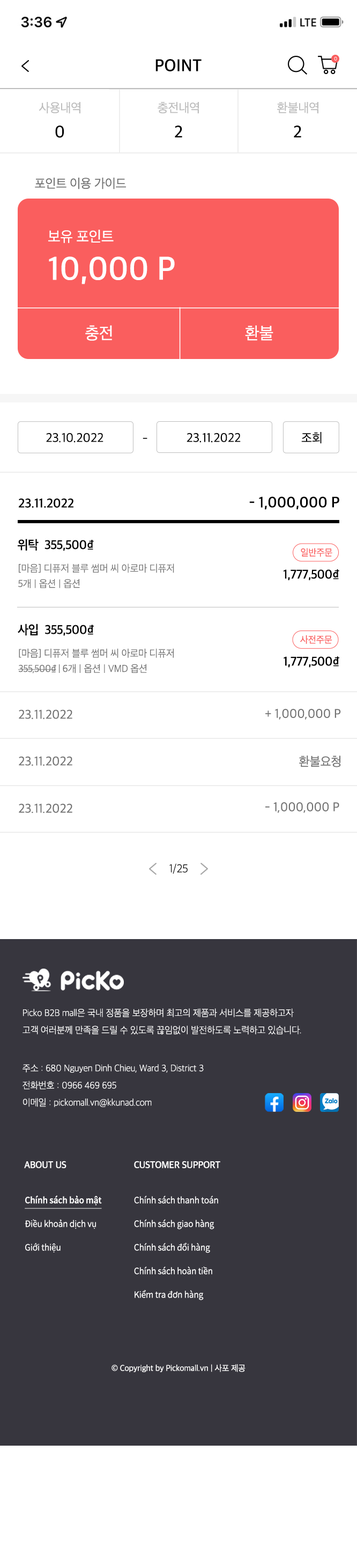
<style>
.page{position:relative;width:357px;height:1568px;background:#ffffff}
.page>*{position:absolute;margin:0}
.t1{font:17.2px "AppleSDGothicNeo-SemiBold";letter-spacing:0.017em;color:#000000;text-transform:uppercase}
.t2{font:5.3px "AppleSDGothicNeo-UltraLight";letter-spacing:-0.01em;color:#ffffff}
.t3{font:12.9px "AppleSDGothicNeo-Regular";letter-spacing:-0.01em;color:#bdbdbd;scale:0.97 1}
.t4{font:17.2px "AppleSDGothicNeo-Medium";letter-spacing:-0.01em;color:#020202;scale:0.97 1}
.t5{font:12.9px "AppleSDGothicNeo-Regular";letter-spacing:-0.01em;color:#727272;scale:0.97 1}
.t6{font:15px "AppleSDGothicNeo-Regular";letter-spacing:-0.01em;color:#ffffff;scale:0.97 1}
.t7{font:33.4px "AppleSDGothicNeo-SemiBold";letter-spacing:-0.01em;color:#ffffff;scale:0.97 1}
.t8{font:17.2px "AppleSDGothicNeo-Regular";letter-spacing:-0.01em;color:#ffffff;scale:0.97 1}
.t9{font:12.9px "AppleSDGothicNeo-Regular";letter-spacing:-0.01em;color:#000000;scale:0.97 1}
.t10{font:12.5px "AppleSDGothicNeo-Regular";letter-spacing:-0.01em;color:#000000;scale:0.97 1}
.t11{font:15.3px "AppleSDGothicNeo-SemiBold";letter-spacing:-0.01em;color:#000000}
.t12{font:12.9px "AppleSDGothicNeo-SemiBold";letter-spacing:-0.01em;color:#000000}
.t13{font:12.9px "AppleSDGothicNeo-SemiBold";letter-spacing:-0.022em;color:#010101;scale:0.96 1}
.t14{font:12.9px "NotoSansCJKkr-Medium";letter-spacing:-0.022em;color:#010101;scale:0.96 1}
.t15{font:9.7px "AppleSDGothicNeo-Regular";letter-spacing:-0.01em;color:#fa5e5e;scale:0.97 1}
.t16{font:10.2px/15.3px "AppleSDGothicNeo-Light";letter-spacing:-0.01em;color:#757575;scale:0.97 1}
.t17{font:10.2px/13.1px "AppleSDGothicNeo-Light";letter-spacing:-0.01em;color:#757575;scale:0.97 1}
.t18{font:12.9px "AppleSDGothicNeo-SemiBold";letter-spacing:-0.022em;color:#000000;scale:0.96 1}
.t19{font:12.9px "NotoSansCJKkr-Medium";letter-spacing:-0.022em;color:#000000;scale:0.96 1}
.t20{font:10.2px/15.4px "AppleSDGothicNeo-Light";letter-spacing:-0.01em;color:#727272;scale:0.97 1}
.t21{font:10.2px/13.1px "AppleSDGothicNeo-Light";letter-spacing:-0.01em;color:#727272;scale:0.97 1}
.t22{font:10.2px/15.3px "AppleSDGothicNeo-Light";letter-spacing:-0.022em;color:#727272;scale:0.96 1}
.t23{font:10.2px/15.3px "NotoSansCJKkr-DemiLight";letter-spacing:-0.022em;color:#727272;scale:0.96 1}
.t24{font:10.2px/15.3px "AppleSDGothicNeo-Light";letter-spacing:-0.01em;color:#727272;scale:0.97 1}
.t25{font:12.9px "AppleSDGothicNeo-Regular";letter-spacing:-0.01em;color:#727272}
.t26{font:11.7px "AppleSDGothicNeo-UltraLight";letter-spacing:-0.01em;color:#000000}
.t27{font:9.7px/17.2px "AppleSDGothicNeo-UltraLight";letter-spacing:-0.01em;color:#ffffff;scale:0.97 1}
.t28{font:9.7px "AppleSDGothicNeo-SemiBold";letter-spacing:-0.01em;color:#ffffff;scale:0.97 1}
.t29{font:9.7px "AppleSDGothicNeo-SemiBold";letter-spacing:-0.01em;color:#ffffff;text-transform:uppercase;scale:0.97 1}
.t30{font:8.6px/23.6px "NotoSansCJKkr-DemiLight";letter-spacing:-0.01em;color:#ffffff;scale:0.97 1}
.t31{font:8.6px/23.6px "NotoSansCJKkr-Medium";letter-spacing:-0.01em;color:#ffffff;text-decoration:underline;scale:0.97 1}
.t32{font:8.6px "AppleSDGothicNeo-Regular";letter-spacing:-0.01em;color:#ffffff;scale:0.97 1}
</style>
<div class="page">
<p class="t1" style="left:156px;top:59px;width:46px;height:12px">Point</p>
<p class="t2" style="left:334px;top:56px;width:4px;height:5px">0</p>
<p class="t3" style="left:39px;top:102px;width:41px;height:12px">사용내역</p>
<p class="t3" style="left:158px;top:102px;width:41px;height:12px">충전내역</p>
<p class="t3" style="left:277px;top:101px;width:42px;height:13px">환불내역</p>
<p class="t4" style="left:55px;top:126px;width:9px;height:12px">0</p>
<p class="t4" style="left:175px;top:126px;width:7px;height:11px">2</p>
<p class="t4" style="left:294px;top:126px;width:8px;height:11px">2</p>
<p class="t5" style="left:35px;top:178px;width:91px;height:11px">포인트 이용 가이드</p>
<p class="t6" style="left:48px;top:230px;width:66px;height:13px">보유 포인트</p>
<p class="t7" style="left:49px;top:257px;width:126px;height:27px">10,000 P</p>
<p class="t8" style="left:85px;top:325px;width:27px;height:16px">충전</p>
<p class="t8" style="left:245px;top:325px;width:29px;height:16px">환불</p>
<p class="t9" style="left:46px;top:433px;width:58px;height:10px">23.10.2022</p>
<p class="t10" style="left:143px;top:438px;width:5px;height:1px">-</p>
<p class="t9" style="left:187px;top:433px;width:54px;height:10px">23.11.2022</p>
<p class="t9" style="left:302px;top:432px;width:20px;height:12px">조회</p>
<p class="t11" style="left:250px;top:496px;width:90px;height:14px">- 1,000,000 P</p>
<p class="t12" style="left:19px;top:499px;width:55px;height:9px">23.11.2022</p>
<p class="t13" style="left:17px;top:539px;width:77px;height:12px">위탁  355,500<span class="t14">₫</span></p>
<p class="t15" style="left:301px;top:548px;width:32px;height:9px">일반주문</p>
<p class="t16" style="left:18px;top:563px;width:156px;height:25px">[마음] 디퓨저 블루 썸머 씨 아로마 <span class="t17">디퓨저<br></span>5개 | 옵션 | 옵션</p>
<p class="t18" style="left:284px;top:569px;width:56px;height:12px">1,777,500<span class="t19">₫</span></p>
<p class="t13" style="left:18px;top:624px;width:76px;height:12px">사입  355,500<span class="t14">₫</span></p>
<p class="t15" style="left:301px;top:635px;width:32px;height:9px">사전주문</p>
<p class="t20" style="left:18px;top:648px;width:156px;height:25px">[마음] 디퓨저 블루 썸머 씨 아로마 <span class="t21">디퓨저<br></span><span class="t22">355,500</span><span class="t23">₫ </span><span class="t24">| 6개 | 옵션 | VMD 옵션</span></p>
<p class="t18" style="left:284px;top:656px;width:56px;height:12px">1,777,500<span class="t19">₫</span></p>
<p class="t25" style="left:19px;top:709px;width:53px;height:10px">23.11.2022</p>
<p class="t25" style="left:266px;top:709px;width:75px;height:11px">+ 1,000,000 P</p>
<p class="t25" style="left:19px;top:756px;width:53px;height:10px">23.11.2022</p>
<p class="t25" style="left:299px;top:756px;width:42px;height:11px">환불요청</p>
<p class="t25" style="left:19px;top:803px;width:53px;height:10px">23.11.2022</p>
<p class="t25" style="left:266px;top:802px;width:74px;height:11px">- 1,000,000 P</p>
<p class="t26" style="left:170px;top:863px;width:18px;height:11px">1/25</p>
<p class="t27" style="left:23px;top:1008px;width:279px;height:27px">Picko B2B mall은 국내 정품을 보장하며 최고의 제품과 서비스를 제공하고자<br>고객 여러분께 만족을 드릴 수 있도록 끊임없이 발전하도록 노력하고 있습니다.</p>
<p class="t27" style="left:23px;top:1064px;width:181px;height:43px">주소 : 680 Nguyen Dinh Chieu, Ward 3, District 3<br>전화번호 : 0966 469 695<br>이메일 : pickomall.vn@kkunad.com</p>
<p class="t28" style="left:24px;top:1161px;width:43px;height:7px">ABOUT US</p>
<p class="t29" style="left:134px;top:1161px;width:87px;height:7px">Customer Support</p>
<p class="t30" style="left:25px;top:1195px;width:77px;height:57px"><span class="t31">Chính sách bảo mật<br></span>Điều khoản dịch vụ<br>Giới thiệu</p>
<p class="t30" style="left:134px;top:1196px;width:84px;height:104px">Chính sách thanh toán<br>Chính sách giao hàng<br>Chính sách đổi hàng<br>Chính sách hoàn tiền<br>Kiểm tra đơn hàng</p>
<p class="t32" style="left:112px;top:1364px;width:134px;height:8px">© Copyright by Pickomall.vn | 사포 제공</p>
</div>
